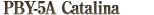
<style>
.page{position:relative;width:154px;height:15px;background:#ffffff}
.page>*{position:absolute;margin:0}
.t1{font:17px "RyuminPro-ExBold";letter-spacing:-0.06em;color:#4a3f32;font-weight:bold;scale:0.9 1}
</style>
<div class="page">
<p class="t1" style="left:3px;top:1px;width:117px;height:14px">PBY-5A Catalina</p>
</div>
